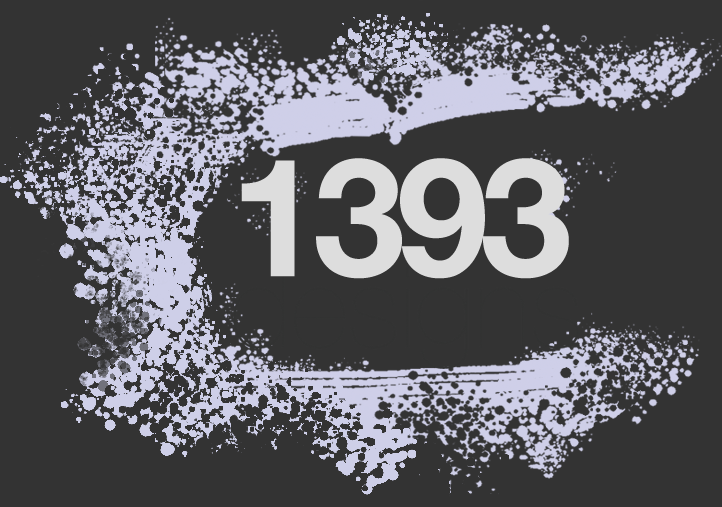
<style>
.page{position:relative;width:722px;height:507px;background:#333333}
.page>*{position:absolute;margin:0}
.t1{font:164.9px "HelveticaNeue-Bold";letter-spacing:-0.05em;color:#dddddd}
</style>
<div class="page">
<p class="t1" style="left:241px;top:158px;width:328px;height:121px">1393</p>
</div>
